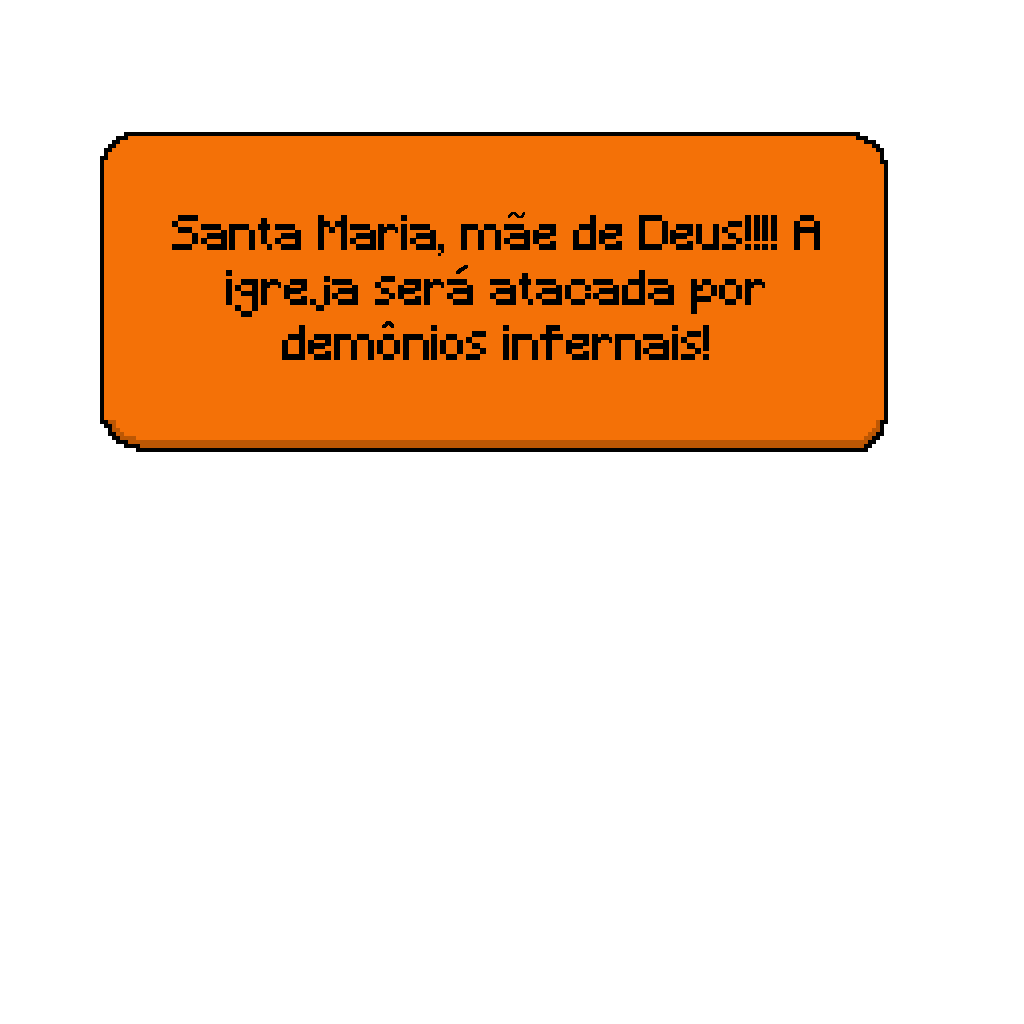
<style>
.page{position:relative;width:1024px;height:1024px;background:#ffffff}
.page>*{position:absolute;margin:0}
.t1{font:45.8px "Minecraft";color:#000000}
</style>
<div class="page">
<p class="t1" style="left:172px;top:215px;width:648px;height:145px;text-align:center">Santa Maria, mae de Deus!!!! A igreja sera atacada por demonios infernais!</p>
</div>
